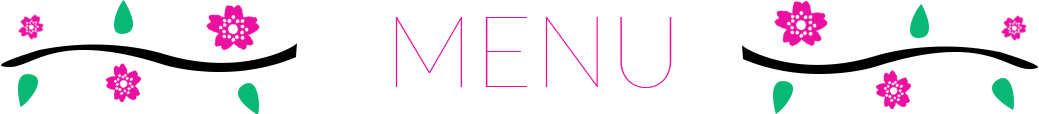
<style>
.page{position:relative;width:1039px;height:114px;background:#ffffff}
.page>*{position:absolute;margin:0}
.t1{font:100px "Lato-Hairline";color:#ec10a1}
</style>
<div class="page">
<p class="t1" style="left:395px;top:17px;width:277px;height:71px">MENU</p>
</div>
